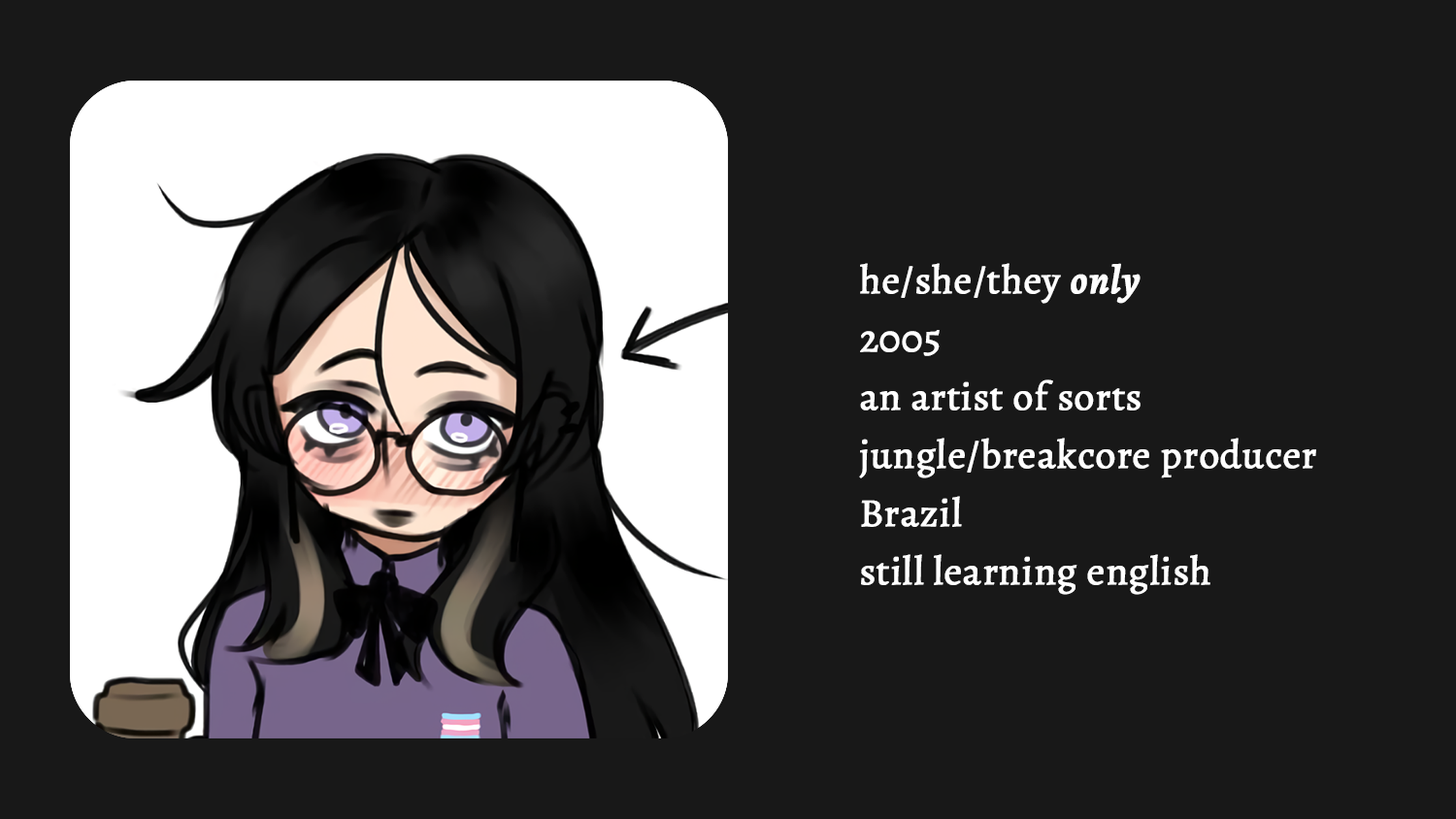
<style>
.page{position:relative;width:1456px;height:819px;background:#181818}
.page>*{position:absolute;margin:0}
.t1{font:39.8px/58.2px "Alegreya-Regular";color:#ffffff;font-weight:bold}
.t2{font:39.8px/58.2px "Alegreya-SemiBoldItalic";color:#ffffff;font-weight:bold}
</style>
<div class="page">
<p class="t1" style="left:859px;top:263px;width:457px;height:332px">he/she/they <span class="t2">only<br></span>2005<br>an artist of sorts<br>jungle/breakcore producer<br>Brazil<br>still learning english</p>
</div>
